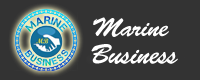
<style>
.page{position:relative;width:200px;height:80px;background:#333333}
.page>*{position:absolute;margin:0}
.t1{font:26.1px "BrushScriptStd";letter-spacing:-0.025em;color:#ffffff}
.t2{font:27.9px "BrushScriptStd";letter-spacing:-0.025em;color:#ffffff}
</style>
<div class="page">
<p class="t1" style="left:93px;top:17px;width:76px;height:20px">Marine</p>
<p class="t2" style="left:91px;top:44px;width:87px;height:20px">Business</p>
</div>
